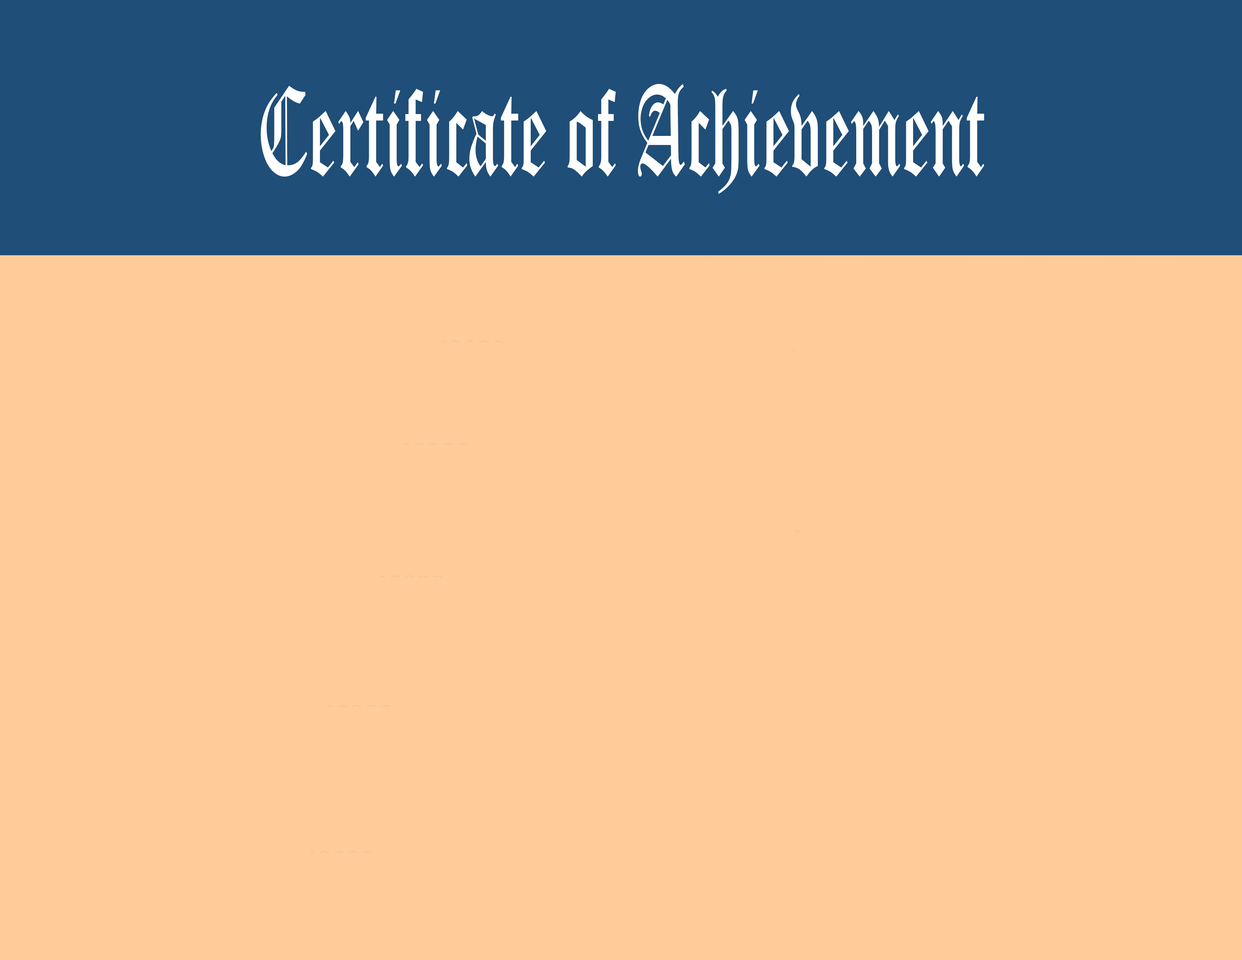
<style>
.page{position:relative;width:1242px;height:960px;background:#ffcb99}
.page>*{position:absolute;margin:0}
.t1{font:125.5px "OldEnglishTextMT";color:#ffffff;scale:0.56 1}
</style>
<div class="page">
<p class="t1" style="left:260px;top:84px;width:724px;height:110px">Certificate of Achievement</p>
</div>
